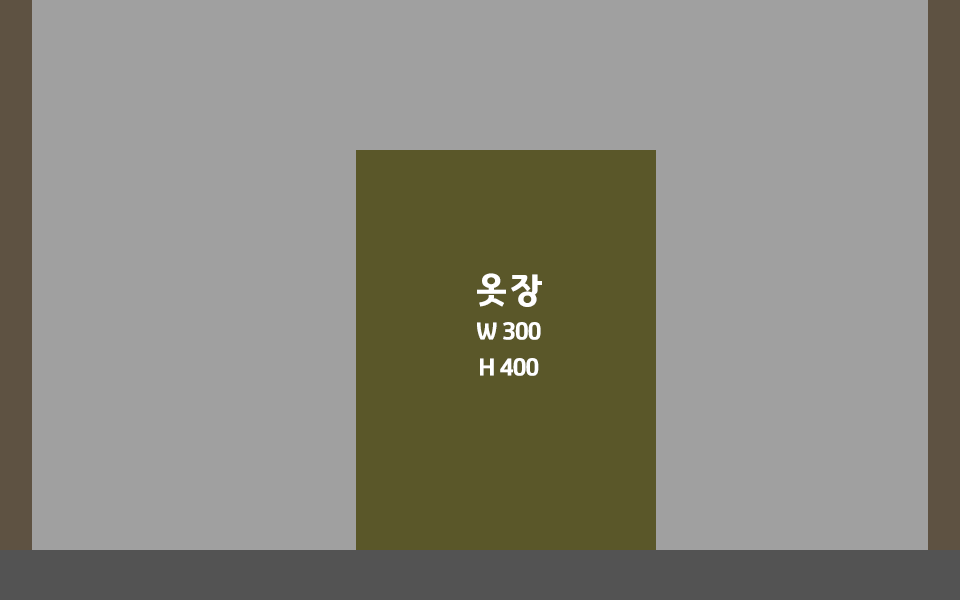
<style>
.page{position:relative;width:960px;height:600px;background:#a0a0a0}
.page>*{position:absolute;margin:0}
.t1{font:24px/36px "GyeonggiTitleV";letter-spacing:-0.05em;color:#ffffff}
.t2{font:36px/12px "GyeonggiTitleV";letter-spacing:-0.05em;color:#ffffff}
</style>
<div class="page">
<p class="t1" style="left:477px;top:273px;width:65px;height:103px;text-align:center"><span class="t2">옷장<br><br><br><br></span>W 300<br>H 400</p>
</div>
